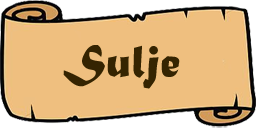
<style>
.page{position:relative;width:256px;height:128px;background:#efbf7f}
.page>*{position:absolute;margin:0}
.t1{font:48px "MaturaMTScriptCapitals";color:#352401}
</style>
<div class="page">
<p class="t1" style="left:63px;top:45px;width:117px;height:44px">Sulje</p>
</div>
